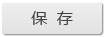
<style>
.page{position:relative;width:105px;height:37px}
.page>*{position:absolute;margin:0}
.t1{font:16px "MicrosoftYaHei";color:#444444}
</style>
<div class="page">
<p class="t1" style="left:31px;top:11px;width:42px;height:14px">保  存</p>
</div>
